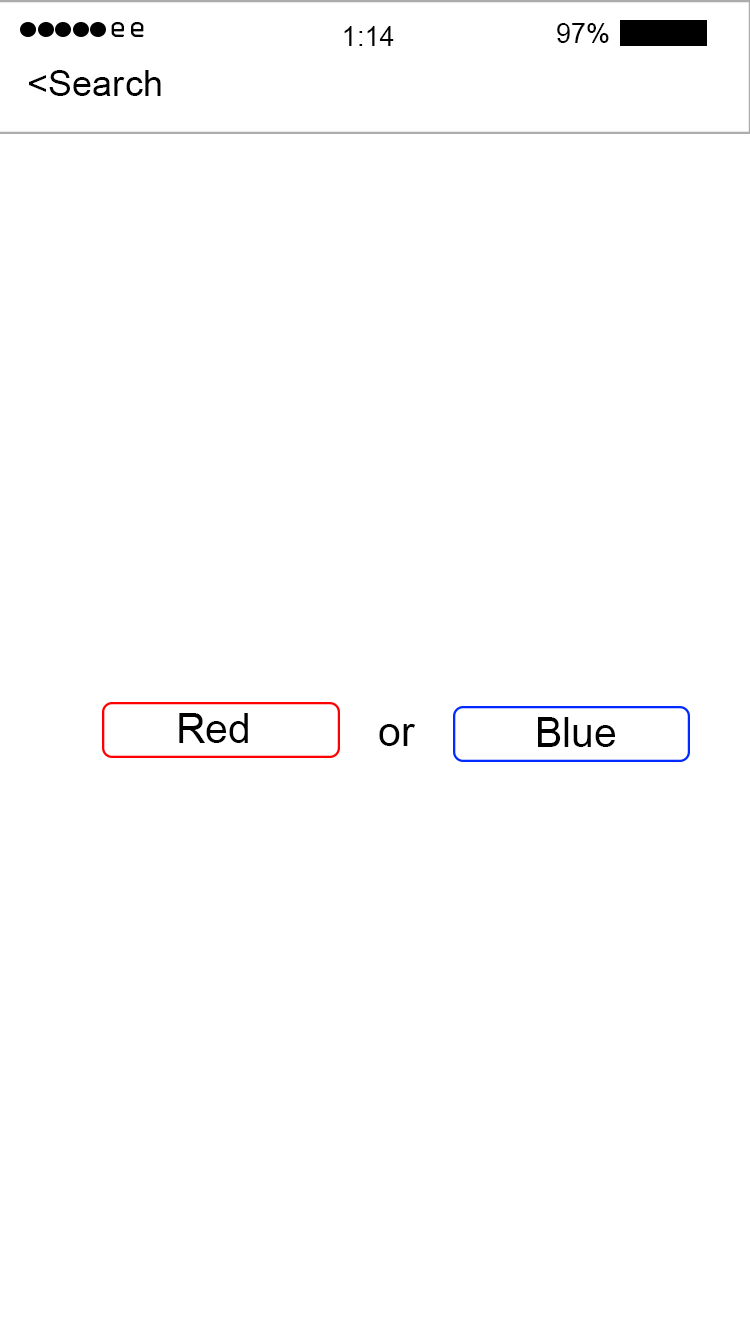
<style>
.page{position:relative;width:750px;height:1334px;background:#ffffff}
.page>*{position:absolute;margin:0}
.t1{font:27.2px "OCRAStd";color:#000000}
.t2{font:27.2px "ArialMT";color:#000000}
.t3{font:36.2px "ArialMT";color:#000000}
.t4{font:40.8px "ArialMT";color:#000000}
</style>
<div class="page">
<p class="t1" style="left:111px;top:22px;width:33px;height:15px">ee</p>
<p class="t2" style="left:344px;top:26px;width:50px;height:20px">1:14</p>
<p class="t2" style="left:557px;top:23px;width:52px;height:20px">97%</p>
<p class="t3" style="left:29px;top:70px;width:132px;height:26px">&lt;Search</p>
<p class="t4" style="left:179px;top:713px;width:69px;height:30px">Red</p>
<p class="t4" style="left:379px;top:724px;width:37px;height:22px">or</p>
<p class="t4" style="left:538px;top:717px;width:77px;height:30px">Blue</p>
</div>
